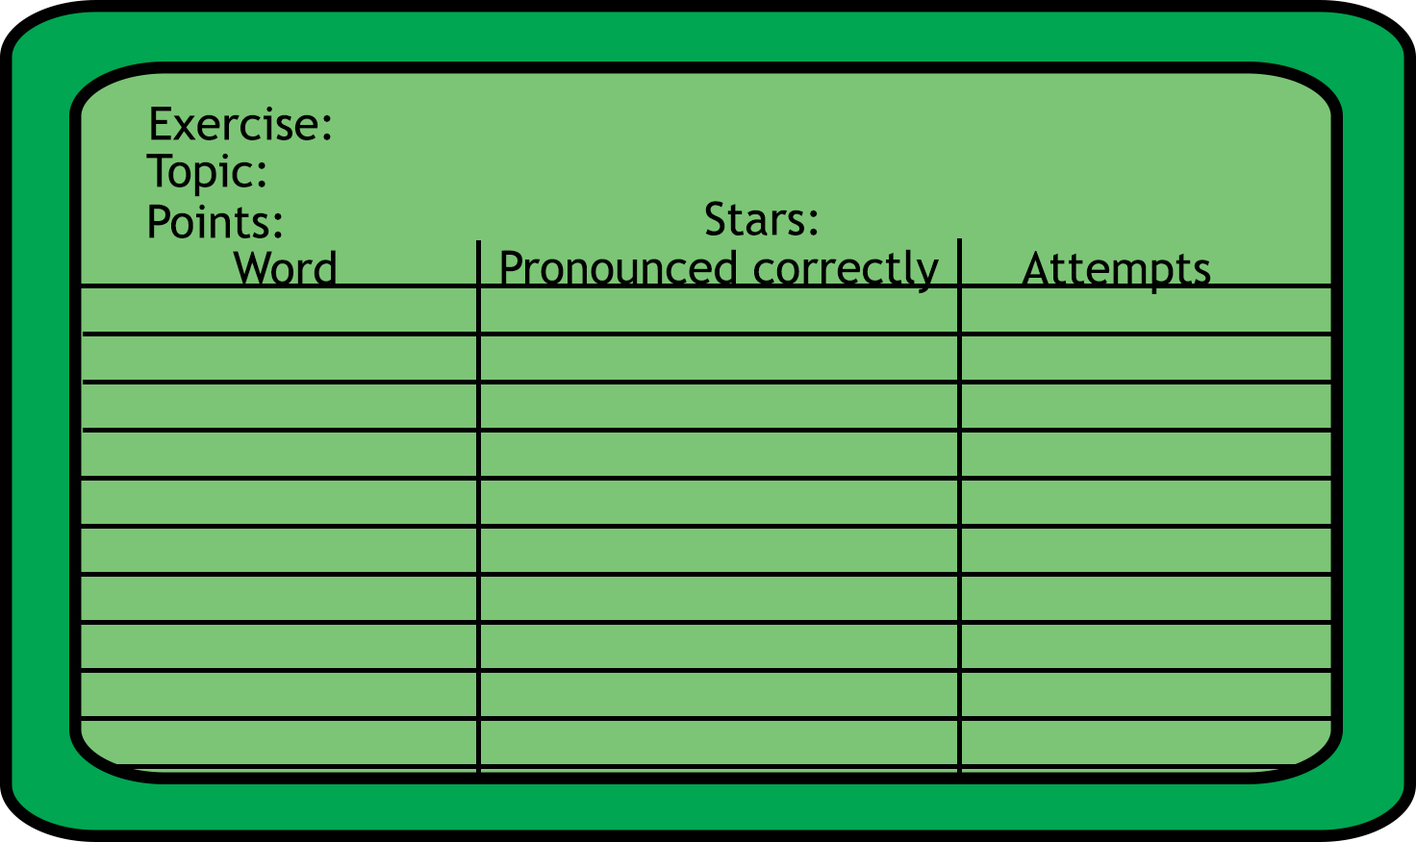
<style>
.page{position:relative;width:1416px;height:842px;background:#7cc576}
.page>*{position:absolute;margin:0}
.t1{font:46.2px "TrebuchetMS";color:#000000}
</style>
<div class="page">
<p class="t1" style="left:151px;top:106px;width:180px;height:34px">Exercise:</p>
<p class="t1" style="left:146px;top:153px;width:119px;height:44px">Topic:</p>
<p class="t1" style="left:149px;top:204px;width:133px;height:34px">Points:</p>
<p class="t1" style="left:705px;top:201px;width:112px;height:35px">Stars:</p>
<p class="t1" style="left:233px;top:250px;width:103px;height:36px">Word</p>
<p class="t1" style="left:501px;top:249px;width:438px;height:45px">Pronounced correctly</p>
<p class="t1" style="left:1021px;top:251px;width:190px;height:43px">Attempts</p>
</div>
